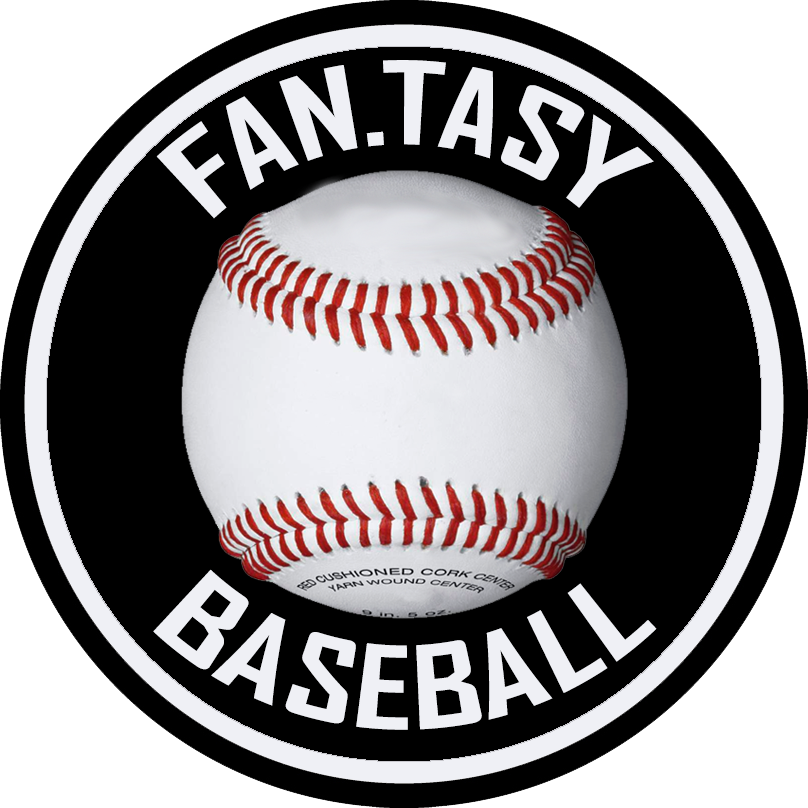
<style>
.page{position:relative;width:808px;height:808px;background:#000000}
.page>*{position:absolute;margin:0}
.t1{font:110px "AgencyFB-Bold";color:#eff0f5}
</style>
<div class="page">
<p class="t1" style="left:156px;top:60px;width:498px;height:159px">FAN.TASY</p>
<p class="t1" style="left:153px;top:569px;width:504px;height:161px">BASEBALL</p>
</div>
